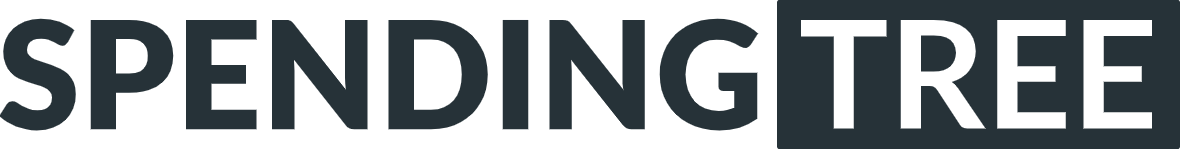
<style>
.page{position:relative;width:1180px;height:149px;background:#ffffff}
.page>*{position:absolute;margin:0}
.t1{font:150px "Lato-Black";color:#263238}
.t2{font:150px "Lato-Bold";color:#ffffff}
</style>
<div class="page">
<p class="t1" style="left:0px;top:18px;width:759px;height:113px">SPENDING</p>
<p class="t2" style="left:800px;top:19px;width:352px;height:110px">TREE</p>
</div>
